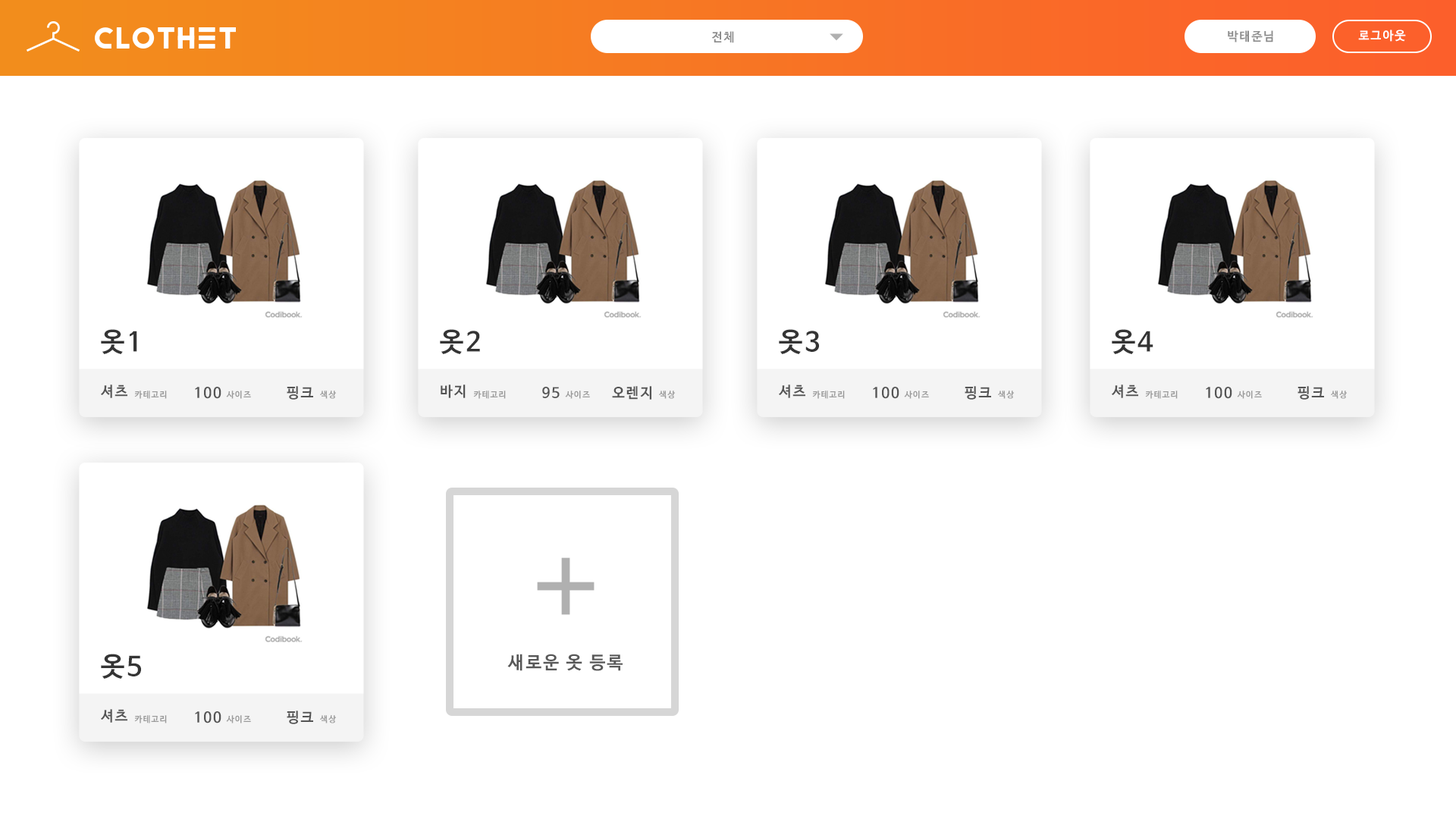
<style>
.page{position:relative;width:1456px;height:819px;background:#ffffff}
.page>*{position:absolute;margin:0}
.t1{font:12.1px "NanumBarunGothicBold";letter-spacing:0.1em;color:#ffffff}
.t2{font:12.1px "NanumBarunGothicBold";letter-spacing:0.1em;color:#8d8d8d}
.t3{font:26.4px "NanumBarunGothicBold";letter-spacing:0.1em;color:#343434}
.t4{font:14.3px "NanumBarunGothicBold";letter-spacing:0.1em;color:#545454}
.t5{font:8.5px "NanumBarunGothicBold";letter-spacing:0.1em;color:#9b9b9b}
.t6{font:17.7px "NanumBarunGothicBold";letter-spacing:0.1em;color:#585858}
</style>
<div class="page">
<p class="t1" style="left:1358px;top:30px;width:48px;height:12px">로그아웃</p>
<p class="t2" style="left:711px;top:31px;width:23px;height:12px">전체</p>
<p class="t2" style="left:1228px;top:30px;width:45px;height:12px">박태준님</p>
<p class="t3" style="left:101px;top:329px;width:36px;height:25px">옷1</p>
<p class="t3" style="left:440px;top:329px;width:40px;height:25px">옷2</p>
<p class="t3" style="left:779px;top:329px;width:40px;height:25px">옷3</p>
<p class="t3" style="left:1112px;top:329px;width:41px;height:25px">옷4</p>
<p class="t4" style="left:101px;top:384px;width:26px;height:14px">셔츠</p>
<p class="t4" style="left:195px;top:387px;width:26px;height:12px">100</p>
<p class="t4" style="left:287px;top:386px;width:26px;height:14px">핑크</p>
<p class="t4" style="left:441px;top:384px;width:25px;height:14px">바지</p>
<p class="t4" style="left:542px;top:387px;width:18px;height:11px">95</p>
<p class="t4" style="left:612px;top:386px;width:39px;height:14px">오렌지</p>
<p class="t4" style="left:779px;top:384px;width:26px;height:14px">셔츠</p>
<p class="t4" style="left:873px;top:387px;width:26px;height:12px">100</p>
<p class="t4" style="left:965px;top:386px;width:26px;height:14px">핑크</p>
<p class="t4" style="left:1112px;top:384px;width:26px;height:14px">셔츠</p>
<p class="t4" style="left:1206px;top:387px;width:26px;height:12px">100</p>
<p class="t4" style="left:1297px;top:386px;width:27px;height:14px">핑크</p>
<p class="t5" style="left:134px;top:391px;width:33px;height:8px">카테고리</p>
<p class="t5" style="left:226px;top:391px;width:25px;height:8px">사이즈</p>
<p class="t5" style="left:320px;top:391px;width:16px;height:8px">색상</p>
<p class="t5" style="left:473px;top:391px;width:33px;height:8px">카테고리</p>
<p class="t5" style="left:565px;top:391px;width:25px;height:8px">사이즈</p>
<p class="t5" style="left:659px;top:391px;width:16px;height:8px">색상</p>
<p class="t5" style="left:812px;top:391px;width:33px;height:8px">카테고리</p>
<p class="t5" style="left:904px;top:391px;width:25px;height:8px">사이즈</p>
<p class="t5" style="left:998px;top:391px;width:16px;height:8px">색상</p>
<p class="t5" style="left:1145px;top:391px;width:33px;height:8px">카테고리</p>
<p class="t5" style="left:1237px;top:391px;width:25px;height:8px">사이즈</p>
<p class="t5" style="left:1331px;top:391px;width:16px;height:8px">색상</p>
<p class="t3" style="left:101px;top:654px;width:40px;height:25px">옷5</p>
<p class="t6" style="left:507px;top:654px;width:116px;height:17px">새로운 옷 등록</p>
<p class="t4" style="left:101px;top:709px;width:26px;height:14px">셔츠</p>
<p class="t4" style="left:195px;top:711px;width:26px;height:12px">100</p>
<p class="t4" style="left:287px;top:711px;width:26px;height:13px">핑크</p>
<p class="t5" style="left:134px;top:715px;width:33px;height:8px">카테고리</p>
<p class="t5" style="left:226px;top:715px;width:25px;height:8px">사이즈</p>
<p class="t5" style="left:320px;top:715px;width:16px;height:8px">색상</p>
</div>
